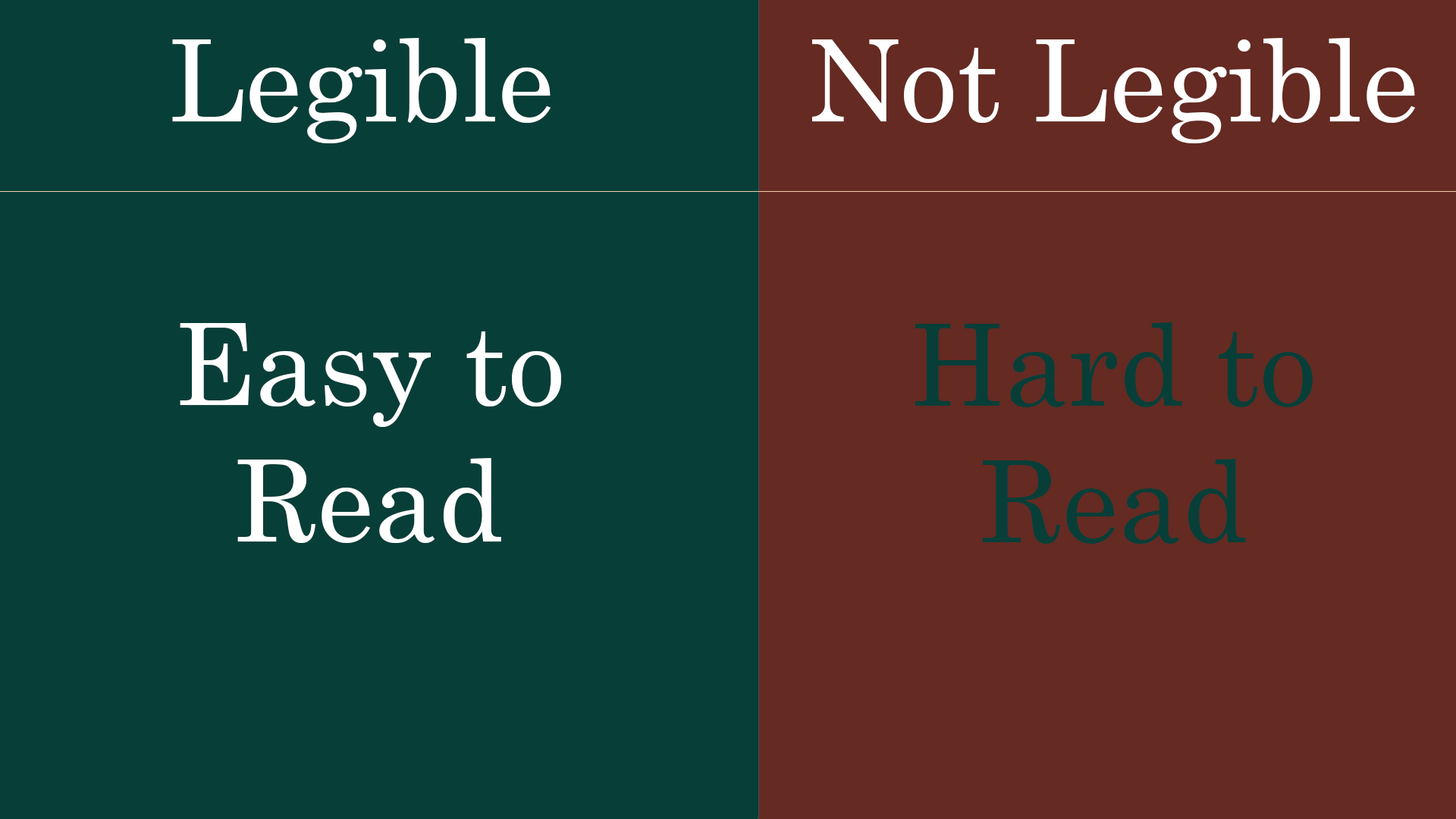
<style>
.page{position:relative;width:1456px;height:819px;background:#083e38}
.page>*{position:absolute;margin:0}
.t1{font:113.7px "Century";color:#ffffff}
.t2{font:113.7px "Century";color:#083e38}
</style>
<div class="page">
<p class="t1" style="left:172px;top:38px;width:379px;height:105px">Legible</p>
<p class="t1" style="left:812px;top:38px;width:603px;height:105px">Not Legible</p>
<p class="t1" style="left:180px;top:323px;width:381px;height:220px;text-align:center">Easy to Read</p>
<p class="t2" style="left:915px;top:322px;width:398px;height:222px;text-align:center">Hard to Read</p>
</div>
